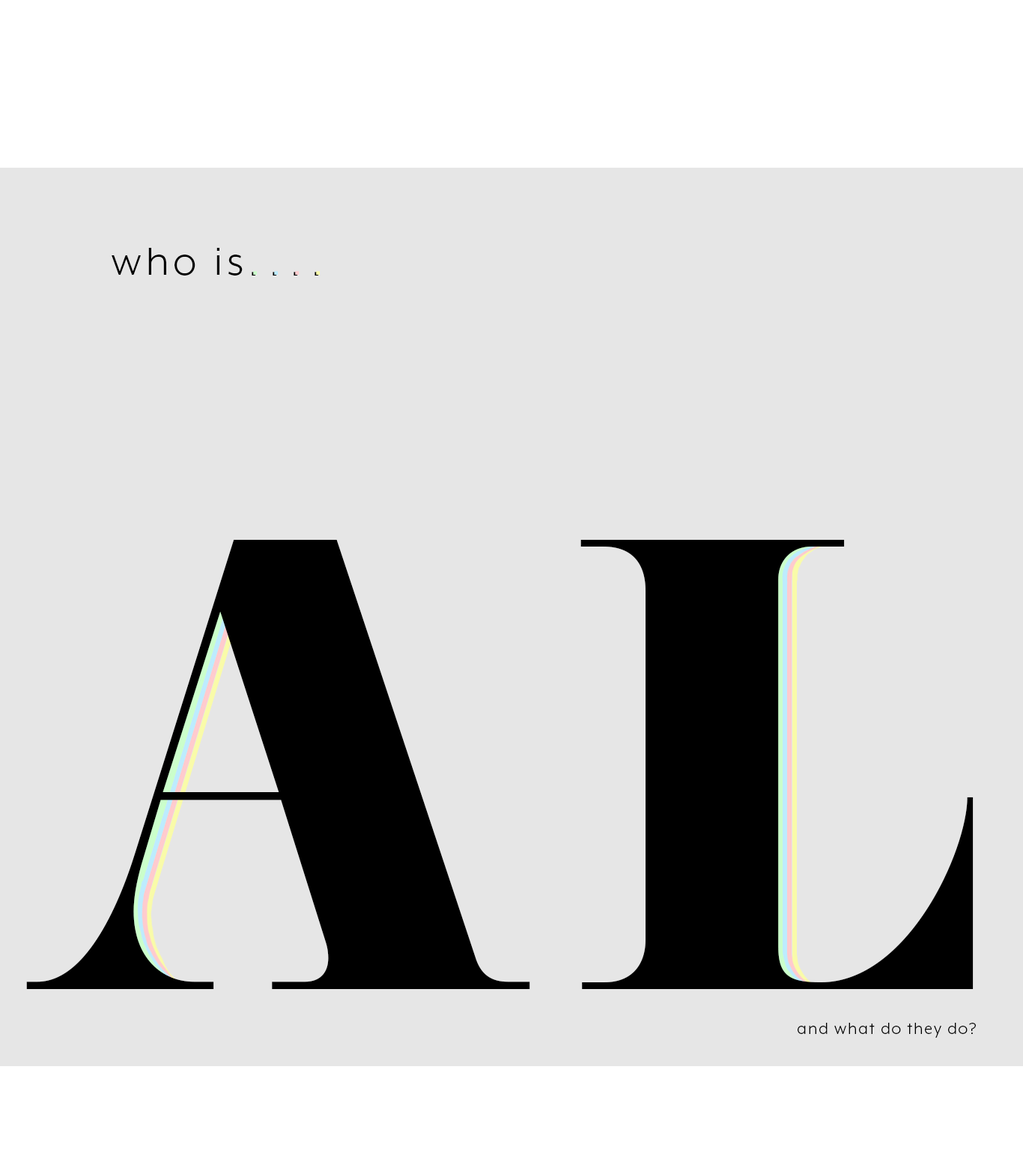
<style>
.page{position:relative;width:1023px;height:1165px;background:#e6e6e6}
.page>*{position:absolute;margin:0}
.t1{font:44.9px "MrEavesXLModOT-Book";letter-spacing:0.1em;color:#000000}
.t2{font:74.9px "MrEavesXLModOT-Light";letter-spacing:0.1em;color:#cbffcb}
.t3{font:74.9px "MrEavesXLModOT-Light";letter-spacing:0.1em;color:#bdecff}
.t4{font:74.9px "MrEavesXLModOT-Light";letter-spacing:0.1em;color:#ffcbce}
.t5{font:74.9px "MrEavesXLModOT-Light";letter-spacing:0.1em;color:#f9fba9}
.t6{font:74.9px "MrEavesXLModOT-Light";letter-spacing:0.1em}
.t7{font:562.9px "EloquentJFPro-Regular";letter-spacing:0.075em;color:#000000}
.t8{font:18px "MrEavesXLModOT-Book";letter-spacing:0.075em;color:#000000}
</style>
<div class="page">
<p class="t1" style="left:112px;top:248px;width:208px;height:28px">who is<span class="t2">.</span><span class="t3">.</span><span class="t4">.</span><span class="t5">.</span></p>
<p class="t6" style="left:252px;top:272px;width:66px;height:4px">....</p>
<p class="t7" style="left:26px;top:540px;width:948px;height:449px">AL</p>
<p class="t8" style="left:798px;top:1023px;width:178px;height:15px">and what do they do?</p>
</div>
